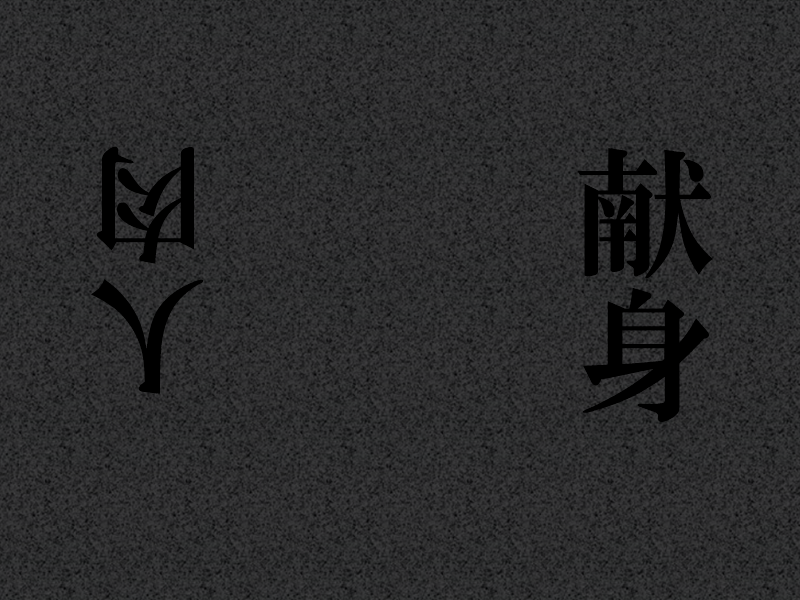
<style>
.page{position:relative;width:800px;height:600px}
.page>*{position:absolute;margin:0}
.t1{font:131.2px "HGMinchoE";color:#000000;scale:0.89 1}
.t2{font:142.5px "HGMinchoE";color:#000000}
</style>
<div class="page">
<p class="t1" style="left:91px;top:146px;width:113px;height:248px;rotate:180deg">人肉</p>
<p class="t2" style="left:577px;top:148px;width:136px;height:274px">献身</p>
</div>
